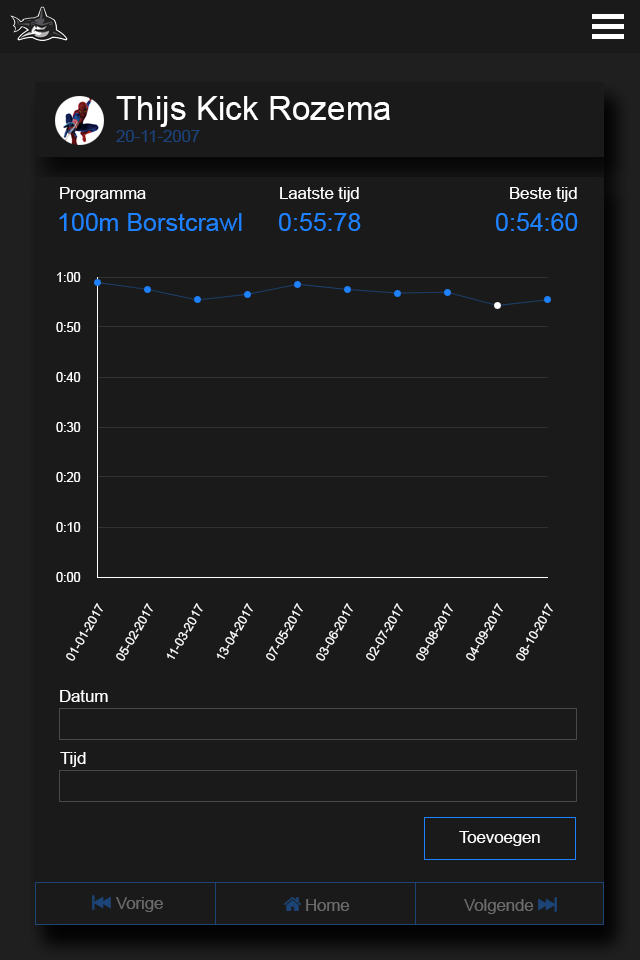
<style>
.page{position:relative;width:640px;height:960px;background:#1a1a1a}
.page>*{position:absolute;margin:0}
.t1{font:33.3px "ArialMT";color:#ffffff}
.t2{font:16.7px "ArialMT";color:#1b437c}
.t3{font:16.7px "ArialMT";color:#ffffff}
.t4{font:25px "ArialMT";color:#1e82ff}
.t5{font:12.5px "ArialMT";color:#ffffff}
.t6{font:16.7px "ArialMT";color:#6b6b6b}
</style>
<div class="page">
<p class="t1" style="left:116px;top:96px;width:274px;height:31px">Thijs Kick Rozema</p>
<p class="t2" style="left:116px;top:130px;width:84px;height:12px">20-11-2007</p>
<p class="t3" style="left:60px;top:187px;width:86px;height:15px">Programma</p>
<p class="t3" style="left:280px;top:187px;width:79px;height:15px">Laatste tijd</p>
<p class="t3" style="left:510px;top:187px;width:67px;height:15px">Beste tijd</p>
<p class="t4" style="left:59px;top:213px;width:183px;height:18px">100m Borstcrawl</p>
<p class="t4" style="left:279px;top:213px;width:82px;height:18px">0:55:78</p>
<p class="t4" style="left:496px;top:213px;width:82px;height:18px">0:54:60</p>
<p class="t5" style="left:57px;top:272px;width:24px;height:10px">1:00</p>
<p class="t5" style="left:56px;top:322px;width:25px;height:10px">0:50</p>
<p class="t5" style="left:56px;top:372px;width:25px;height:10px">0:40</p>
<p class="t5" style="left:56px;top:422px;width:25px;height:10px">0:30</p>
<p class="t5" style="left:56px;top:472px;width:25px;height:10px">0:20</p>
<p class="t5" style="left:56px;top:522px;width:25px;height:10px">0:10</p>
<p class="t5" style="left:56px;top:572px;width:25px;height:10px">0:00</p>
<p class="t5" style="left:66px;top:603px;width:37px;height:58px;rotate:-60deg">01-01-2017</p>
<p class="t5" style="left:116px;top:603px;width:37px;height:58px;rotate:-60deg">05-02-2017</p>
<p class="t5" style="left:166px;top:603px;width:37px;height:56px;rotate:-60deg">11-03-2017</p>
<p class="t5" style="left:216px;top:603px;width:37px;height:56px;rotate:-60deg">13-04-2017</p>
<p class="t5" style="left:266px;top:603px;width:37px;height:58px;rotate:-60deg">07-05-2017</p>
<p class="t5" style="left:316px;top:603px;width:37px;height:58px;rotate:-60deg">03-06-2017</p>
<p class="t5" style="left:366px;top:603px;width:37px;height:58px;rotate:-60deg">02-07-2017</p>
<p class="t5" style="left:416px;top:603px;width:37px;height:58px;rotate:-60deg">09-08-2017</p>
<p class="t5" style="left:466px;top:603px;width:37px;height:58px;rotate:-60deg">04-09-2017</p>
<p class="t5" style="left:516px;top:603px;width:37px;height:58px;rotate:-60deg">08-10-2017</p>
<p class="t3" style="left:60px;top:690px;width:48px;height:12px">Datum</p>
<p class="t3" style="left:60px;top:752px;width:26px;height:15px">Tijd</p>
<p class="t3" style="left:459px;top:831px;width:81px;height:15px">Toevoegen</p>
<p class="t6" style="left:116px;top:897px;width:47px;height:15px">Vorige</p>
<p class="t6" style="left:306px;top:899px;width:44px;height:12px">Home</p>
<p class="t6" style="left:464px;top:899px;width:70px;height:15px">Volgende</p>
</div>
